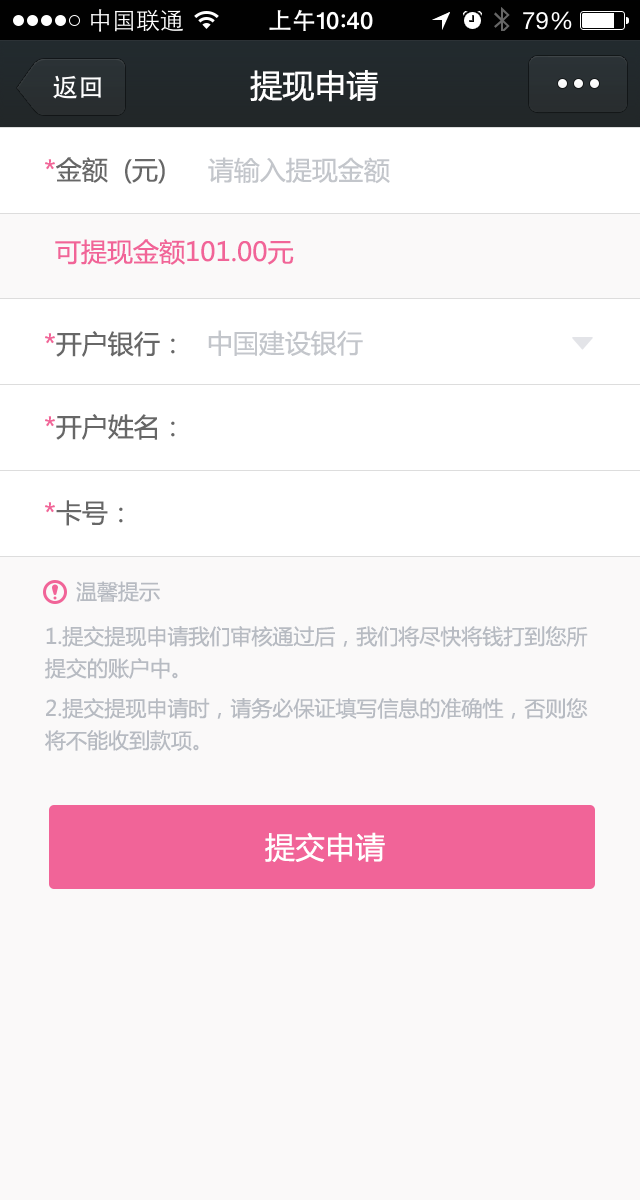
<style>
.page{position:relative;width:640px;height:1200px;background:#faf9f9}
.page>*{position:absolute;margin:0}
.t1{font:32px "MicrosoftYaHei";color:#ffffff}
.t2{font:26px "MicrosoftYaHei";color:#676767}
.t3{font:26px "MicrosoftYaHei";color:#f16498}
.t4{font:26px "MicrosoftYaHei";color:#c3c6cb}
.t5{font:21px "MicrosoftYaHei";color:#b7bbc2}
.t6{font:21px/32px "MicrosoftYaHei";color:#b7bbc2}
.t7{font:30px "MicrosoftYaHei";color:#ffffff}
</style>
<div class="page">
<p class="t1" style="left:250px;top:70px;width:128px;height:32px">提现申请</p>
<p class="t2" style="left:45px;top:157px;width:120px;height:27px"><span class="t3">*</span>金额  (元)</p>
<p class="t4" style="left:208px;top:157px;width:182px;height:27px">请输入提现金额</p>
<p class="t3" style="left:55px;top:239px;width:239px;height:26px">可提现金额101.00元</p>
<p class="t2" style="left:45px;top:331px;width:130px;height:26px"><span class="t3">*</span>开户银行：</p>
<p class="t4" style="left:208px;top:330px;width:155px;height:26px">中国建设银行</p>
<p class="t2" style="left:45px;top:414px;width:130px;height:26px"><span class="t3">*</span>开户姓名：</p>
<p class="t2" style="left:45px;top:500px;width:78px;height:26px"><span class="t3">*</span>卡号：</p>
<p class="t5" style="left:76px;top:581px;width:84px;height:21px">温馨提示</p>
<p class="t6" style="left:45px;top:626px;width:543px;height:53px">1.提交提现申请我们审核通过后，我们将尽快将钱打到您所提交的账户中。</p>
<p class="t6" style="left:45px;top:698px;width:543px;height:53px">2.提交提现申请时，请务必保证填写信息的准确性，否则您将不能收到款项。</p>
<p class="t7" style="left:265px;top:832px;width:120px;height:30px">提交申请</p>
</div>
